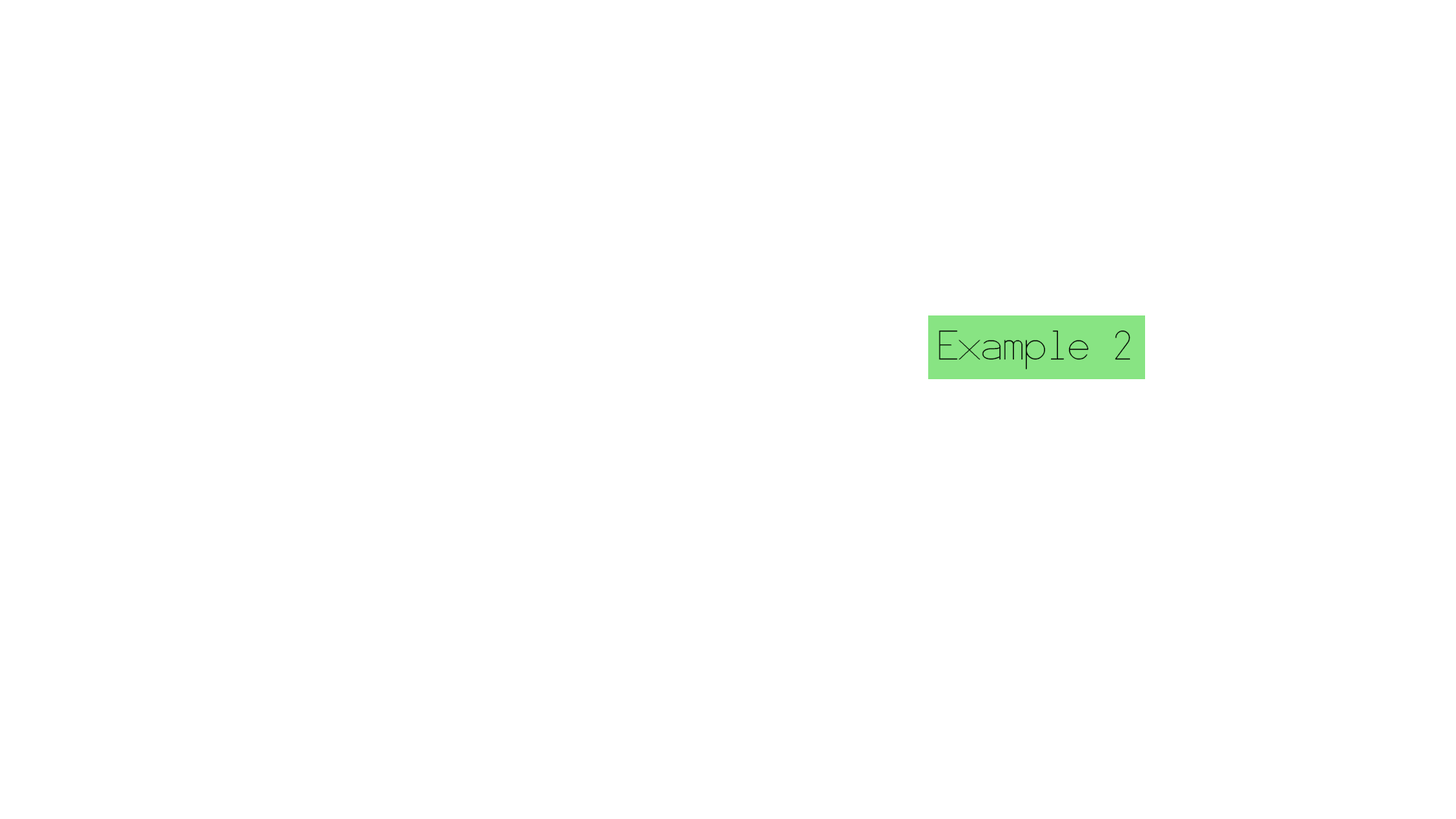
<style>
.page{position:relative;width:1456px;height:819px;background:#ffffff}
.page>*{position:absolute;margin:0}
.t1{font:41.1px "SecretCode";color:#000000}
</style>
<div class="page">
<p class="t1" style="left:939px;top:330px;width:192px;height:39px">Example 2</p>
</div>
